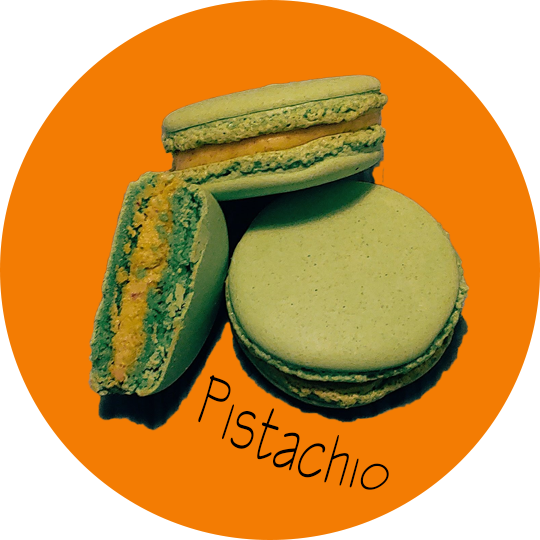
<style>
.page{position:relative;width:540px;height:540px;background:#f37c03}
.page>*{position:absolute;margin:0}
.t1{font:52px "StylusBT";color:#000000}
</style>
<div class="page">
<p class="t1" style="left:198px;top:375px;width:191px;height:115px;rotate:16deg">Pistachio</p>
</div>
